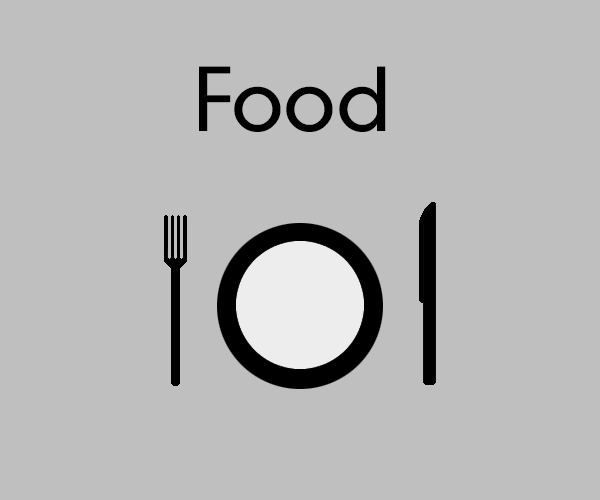
<style>
.page{position:relative;width:600px;height:500px;background:#bfbfbf}
.page>*{position:absolute;margin:0}
.t1{font:91.7px "Champagne&Limousines-Bold";color:#000000}
</style>
<div class="page">
<p class="t1" style="left:199px;top:66px;width:187px;height:66px">Food</p>
</div>
